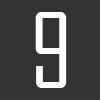
<style>
.page{position:relative;width:100px;height:100px;background:#333333}
.page>*{position:absolute;margin:0}
.t1{font:100px "AgencyFB-Reg";color:#ffffff}
</style>
<div class="page">
<p class="t1" style="left:35px;top:12px;width:32px;height:76px">9</p>
</div>
